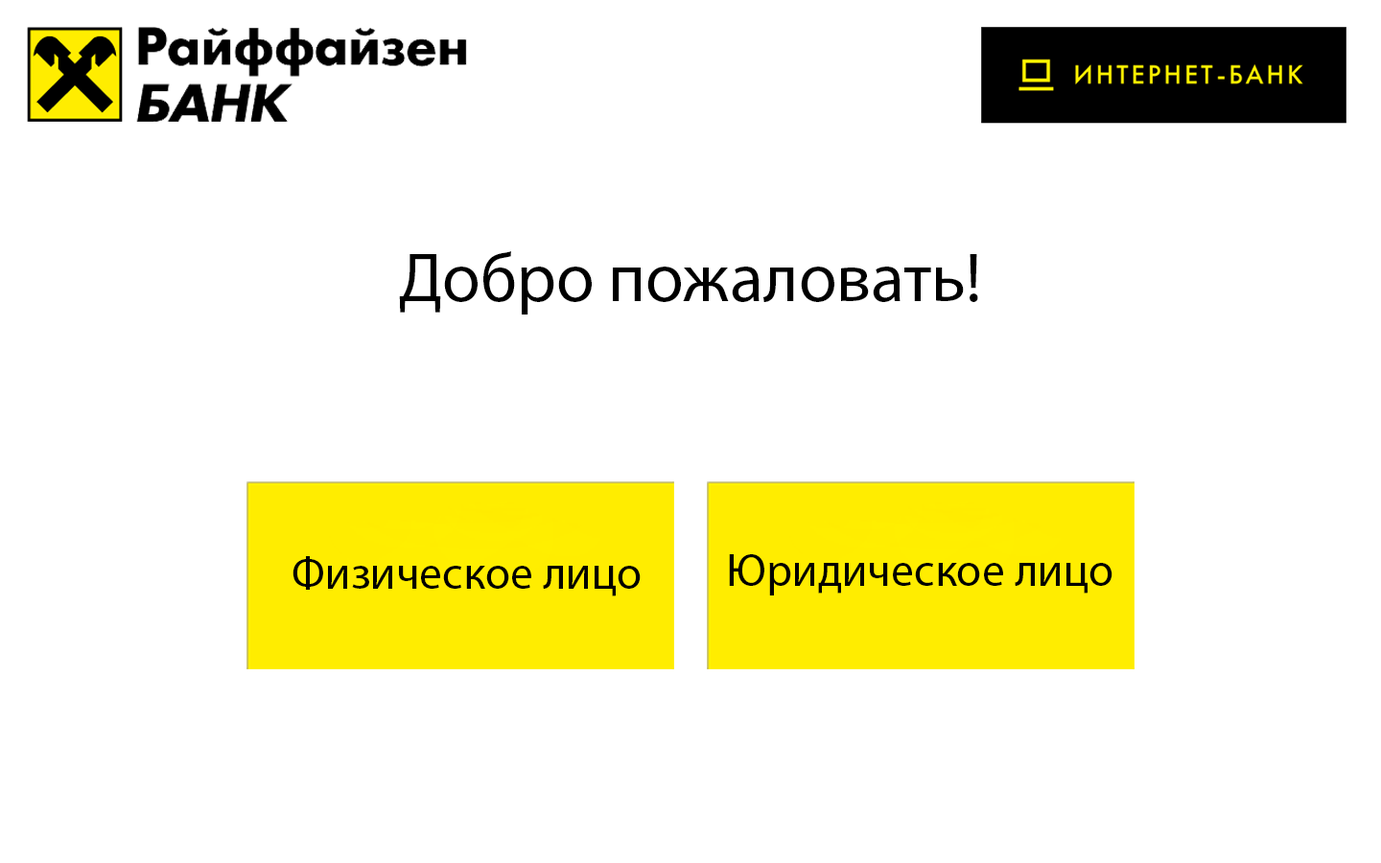
<style>
.page{position:relative;width:1381px;height:863px;background:#ffffff}
.page>*{position:absolute;margin:0}
.t1{font:69.1px "MyriadPro-Regular";color:#000000}
.t2{font:46px "MyriadPro-Regular";color:#000000}
</style>
<div class="page">
<p class="t1" style="left:399px;top:251px;width:579px;height:64px">Добро пожаловать!</p>
<p class="t2" style="left:293px;top:556px;width:348px;height:41px">Физическое лицо</p>
<p class="t2" style="left:729px;top:554px;width:384px;height:42px">Юридическое лицо</p>
</div>
